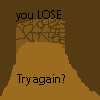
<style>
.page{position:relative;width:100px;height:100px;background:#553b12}
.page>*{position:absolute;margin:0}
.t1{font:12px "MyriadPro-Regular";color:#000000}
</style>
<div class="page">
<p class="t1" style="left:16px;top:10px;width:45px;height:12px">you LOSE</p>
<p class="t1" style="left:17px;top:74px;width:48px;height:12px">Try again?</p>
</div>
